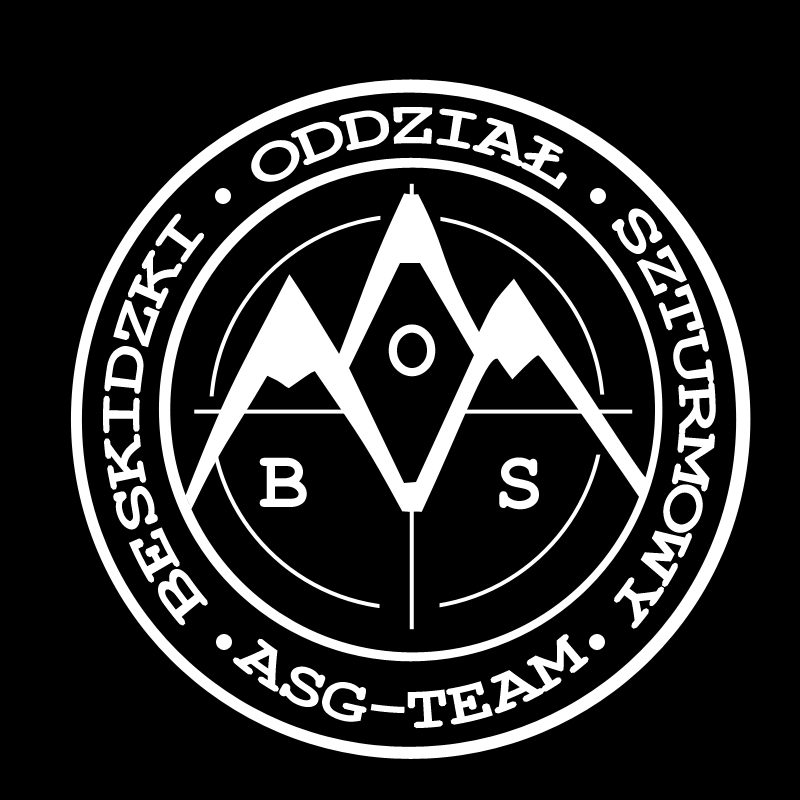
<style>
.page{position:relative;width:800px;height:800px;background:#000000}
.page>*{position:absolute;margin:0}
.t1{font:62.5px "CourierNewPS-BoldMT";letter-spacing:-0.01em;color:#ffffff}
.t2{font:83.3px "CourierNewPS-BoldMT";letter-spacing:-0.01em;color:#ffffff}
</style>
<div class="page">
<p class="t1" style="left:251px;top:107px;width:316px;height:83px">ODDZIAŁ</p>
<p class="t1" style="left:611px;top:208px;width:105px;height:421px;rotate:90deg">SZTURMOWY</p>
<p class="t1" style="left:103px;top:213px;width:105px;height:413px;rotate:-90deg">BESKIDZKI</p>
<p class="t2" style="left:388px;top:324px;width:48px;height:53px">O</p>
<p class="t2" style="left:259px;top:457px;width:48px;height:50px">B</p>
<p class="t2" style="left:499px;top:457px;width:40px;height:53px">S</p>
<p class="t1" style="left:232px;top:634px;width:357px;height:95px">ASG-TEAM</p>
</div>
